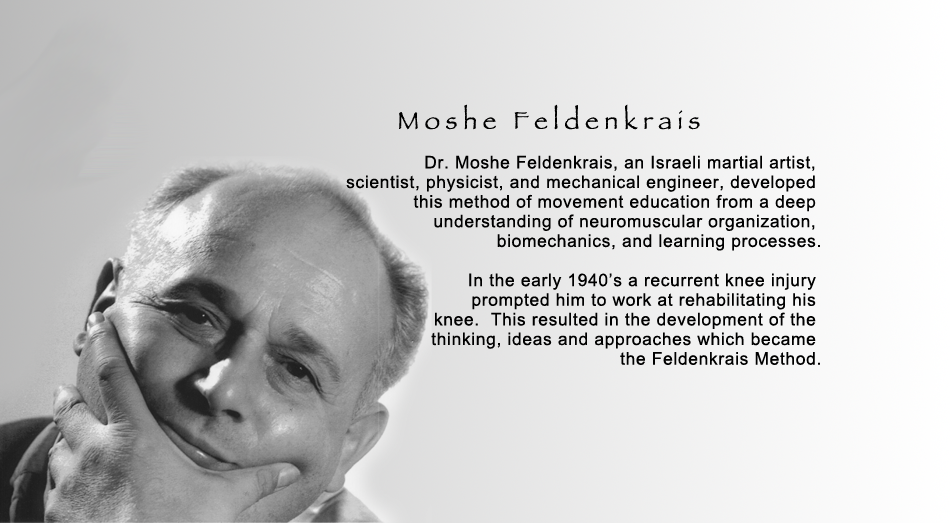
<style>
.page{position:relative;width:950px;height:523px}
.page>*{position:absolute;margin:0}
.t1{font:43.3px "Papyrus";letter-spacing:0.22em;color:#000000}
.t2{font:29.7px/19.6px "ArialMT";letter-spacing:0.04em;color:#000000}
</style>
<div class="page">
<p class="t1" style="left:399px;top:104px;width:301px;height:26px">Moshe Feldenkrais</p>
<p class="t2" style="left:346px;top:155px;width:474px;height:210px;text-align:right">Dr. Moshe Feldenkrais, an Israeli martial artist, <br>scientist, physicist, and mechanical engineer, developed <br>this method of movement education from a deep <br>understanding of neuromuscular organization, <br>biomechanics, and learning processes.<br><br>In the early 1940’s a recurrent knee injury <br>prompted him to work at rehabilitating his <br>knee.  This resulted in the development of the <br>thinking, ideas and approaches which became <br>the Feldenkrais Method.</p>
</div>
